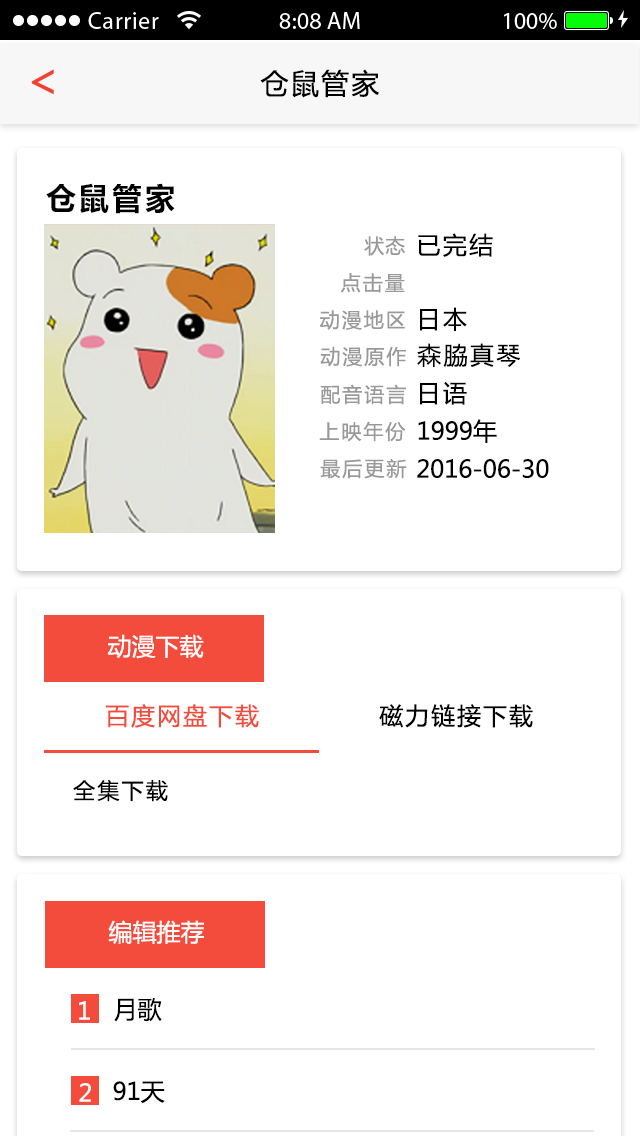
<style>
.page{position:relative;width:640px;height:1136px;background:#ffffff}
.page>*{position:absolute;margin:0}
.t1{font:47.2px "MicrosoftYaHei";letter-spacing:0.08em;color:#f44030}
.t2{font:28px "MicrosoftYaHei";letter-spacing:0.08em;color:#000000}
.t3{font:30px "MicrosoftYaHei-Bold";letter-spacing:0.1em;color:#000000}
.t4{font:24px "MicrosoftYaHei";letter-spacing:0.1em;color:#000000}
.t5{font:20px "MicrosoftYaHei";letter-spacing:0.05em;color:#999999}
.t6{font:20px "MicrosoftYaHei";letter-spacing:0.1em;color:#999999}
.t7{font:24px "MicrosoftYaHei";color:#000000}
.t8{font:24px "MicrosoftYaHei";color:#ffffff}
.t9{font:24px "MicrosoftYaHei";letter-spacing:0.08em;color:#f44c3c}
.t10{font:24px "MicrosoftYaHei";letter-spacing:0.08em;color:#000000}
.t11{font:22px "MicrosoftYaHei";letter-spacing:0.1em;color:#000000}
</style>
<div class="page">
<p class="t1" style="left:31px;top:69px;width:23px;height:26px">&lt;</p>
<p class="t2" style="left:260px;top:69px;width:119px;height:29px">仓鼠管家</p>
<p class="t3" style="left:46px;top:183px;width:129px;height:31px">仓鼠管家</p>
<p class="t4" style="left:418px;top:233px;width:75px;height:24px">已完结</p>
<p class="t5" style="left:364px;top:236px;width:41px;height:20px">状态</p>
<p class="t6" style="left:341px;top:273px;width:64px;height:20px">点击量</p>
<p class="t6" style="left:320px;top:310px;width:85px;height:20px">动漫地区</p>
<p class="t4" style="left:420px;top:307px;width:47px;height:24px">日本</p>
<p class="t6" style="left:320px;top:346px;width:86px;height:21px">动漫原作</p>
<p class="t4" style="left:417px;top:343px;width:104px;height:24px">森脇真琴</p>
<p class="t6" style="left:320px;top:384px;width:86px;height:21px">配音语言</p>
<p class="t4" style="left:420px;top:382px;width:47px;height:23px">日语</p>
<p class="t6" style="left:319px;top:421px;width:87px;height:21px">上映年份</p>
<p class="t7" style="left:418px;top:419px;width:79px;height:24px">1999年</p>
<p class="t6" style="left:320px;top:458px;width:87px;height:21px">最后更新</p>
<p class="t7" style="left:417px;top:459px;width:132px;height:19px">2016-06-30</p>
<p class="t8" style="left:107px;top:634px;width:97px;height:25px">动漫下载</p>
<p class="t9" style="left:105px;top:704px;width:154px;height:24px">百度网盘下载</p>
<p class="t10" style="left:379px;top:704px;width:154px;height:24px">磁力链接下载</p>
<p class="t11" style="left:73px;top:779px;width:95px;height:23px">全集下载</p>
<p class="t8" style="left:108px;top:920px;width:96px;height:24px">编辑推荐</p>
<p class="t8" style="left:79px;top:1001px;width:11px;height:19px">1</p>
<p class="t7" style="left:114px;top:998px;width:48px;height:24px">月歌</p>
<p class="t8" style="left:79px;top:1083px;width:12px;height:19px">2</p>
<p class="t7" style="left:113px;top:1081px;width:52px;height:23px">91天</p>
</div>
